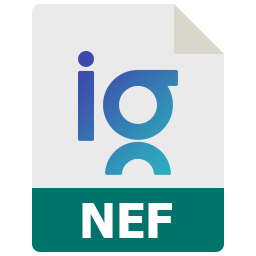
<style>
.page{position:relative;width:256px;height:256px;background:#eaeaea}
.page>*{position:absolute;margin:0}
.t1{font:48px "Tahoma-Bold";color:#ffffff}
</style>
<div class="page">
<p class="t1" style="left:82px;top:203px;width:90px;height:35px">NEF</p>
</div>
